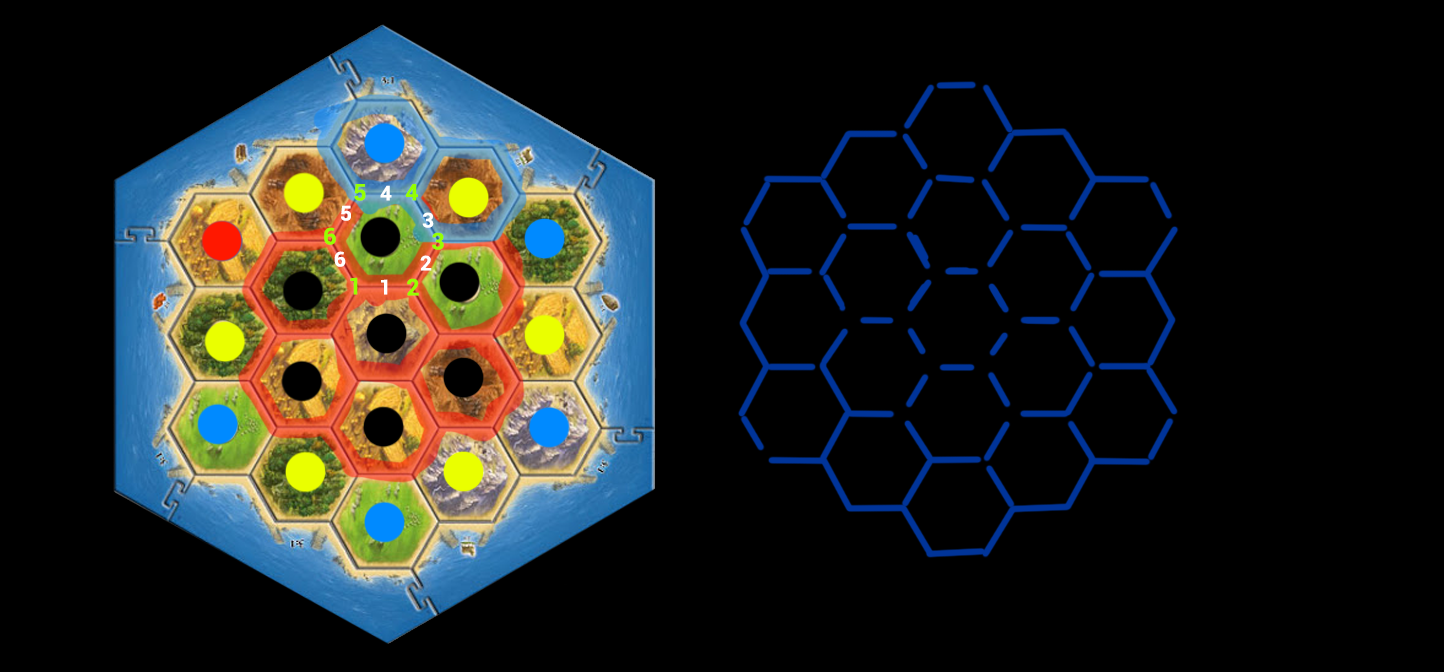
<style>
.page{position:relative;width:1450px;height:672px;background:#000000}
.page>*{position:absolute;margin:0}
.t1{font:23px "Roboto-Bold";letter-spacing:0.15em;color:#96ff00}
.t2{font:20.4px "Roboto-Bold";letter-spacing:0.15em;color:#ffffff}
</style>
<div class="page">
<p class="t1" style="left:354px;top:184px;width:12px;height:17px">5</p>
<p class="t2" style="left:380px;top:185px;width:12px;height:16px">4</p>
<p class="t1" style="left:405px;top:184px;width:13px;height:17px">4</p>
<p class="t2" style="left:341px;top:205px;width:10px;height:16px">5</p>
<p class="t2" style="left:422px;top:212px;width:12px;height:16px">3</p>
<p class="t1" style="left:324px;top:227px;width:12px;height:18px">6</p>
<p class="t1" style="left:432px;top:232px;width:12px;height:18px">3</p>
<p class="t2" style="left:334px;top:251px;width:12px;height:16px">6</p>
<p class="t2" style="left:420px;top:255px;width:12px;height:16px">2</p>
<p class="t1" style="left:350px;top:277px;width:8px;height:18px">1</p>
<p class="t2" style="left:381px;top:279px;width:7px;height:16px">1</p>
<p class="t1" style="left:407px;top:278px;width:12px;height:18px">2</p>
</div>
